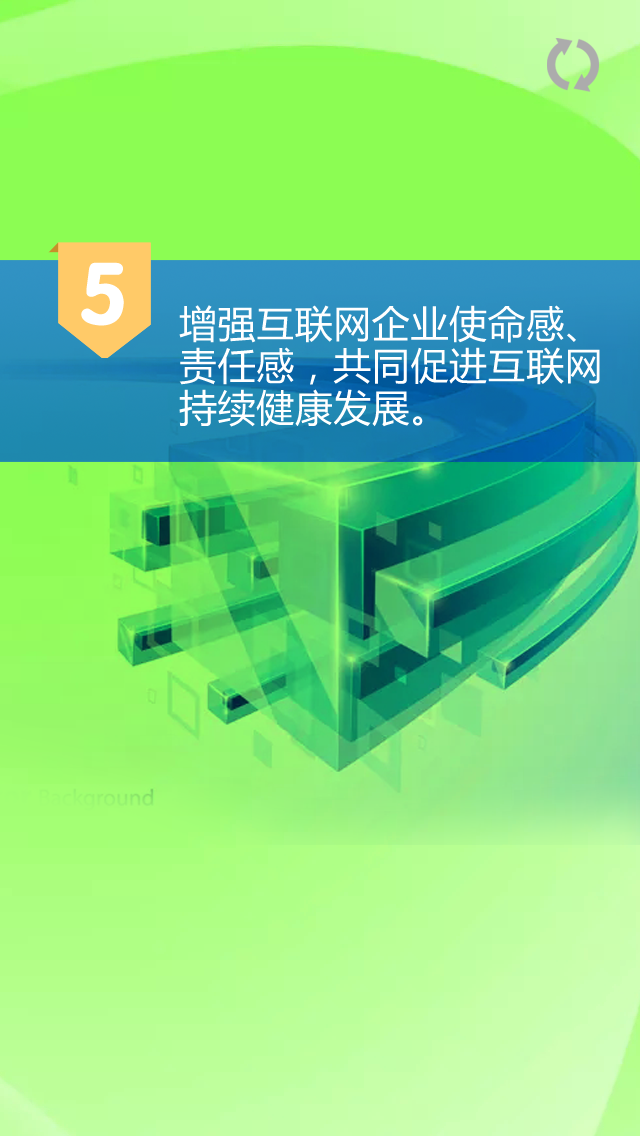
<style>
.page{position:relative;width:640px;height:1136px}
.page>*{position:absolute;margin:0}
.t1{font:87.7px "FZY4JW--GB1-0";letter-spacing:0.015em;color:#ffffff}
.t2{font:38px/42px "MicrosoftYaHei";letter-spacing:0.015em;color:#ffffff}
</style>
<div class="page">
<p class="t1" style="left:81px;top:262px;width:43px;height:64px">5</p>
<p class="t2" style="left:179px;top:305px;width:421px;height:122px">增强互联网企业使命感、责任感，共同促进互联网持续健康发展。</p>
</div>
